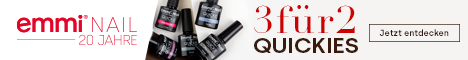
<style>
.page{position:relative;width:468px;height:60px;background:#f5f4f3}
.page>*{position:absolute;margin:0}
.t1{font:38.8px "Didot";letter-spacing:0.05em;color:#ca0202;scale:1.04 1}
.t2{font:8.7px "Silka-SemiBold";color:#381b0c}
.t3{font:21.4px "Silka-SemiBold";color:#381b0c;text-transform:uppercase;scale:1.04 1}
</style>
<div class="page">
<p class="t1" style="left:254px;top:5px;width:101px;height:28px">3für2</p>
<p class="t2" style="left:379px;top:29px;width:70px;height:7px">Jetzt entdecken</p>
<p class="t3" style="left:254px;top:38px;width:104px;height:15px">Quickies</p>
</div>
